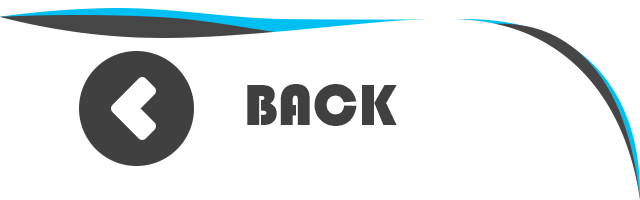
<style>
.page{position:relative;width:640px;height:200px;background:#ffffff}
.page>*{position:absolute;margin:0}
.t1{font:60px "Bauhaus93";color:#404040}
</style>
<div class="page">
<p class="t1" style="left:247px;top:84px;width:150px;height:42px">BACK</p>
</div>
